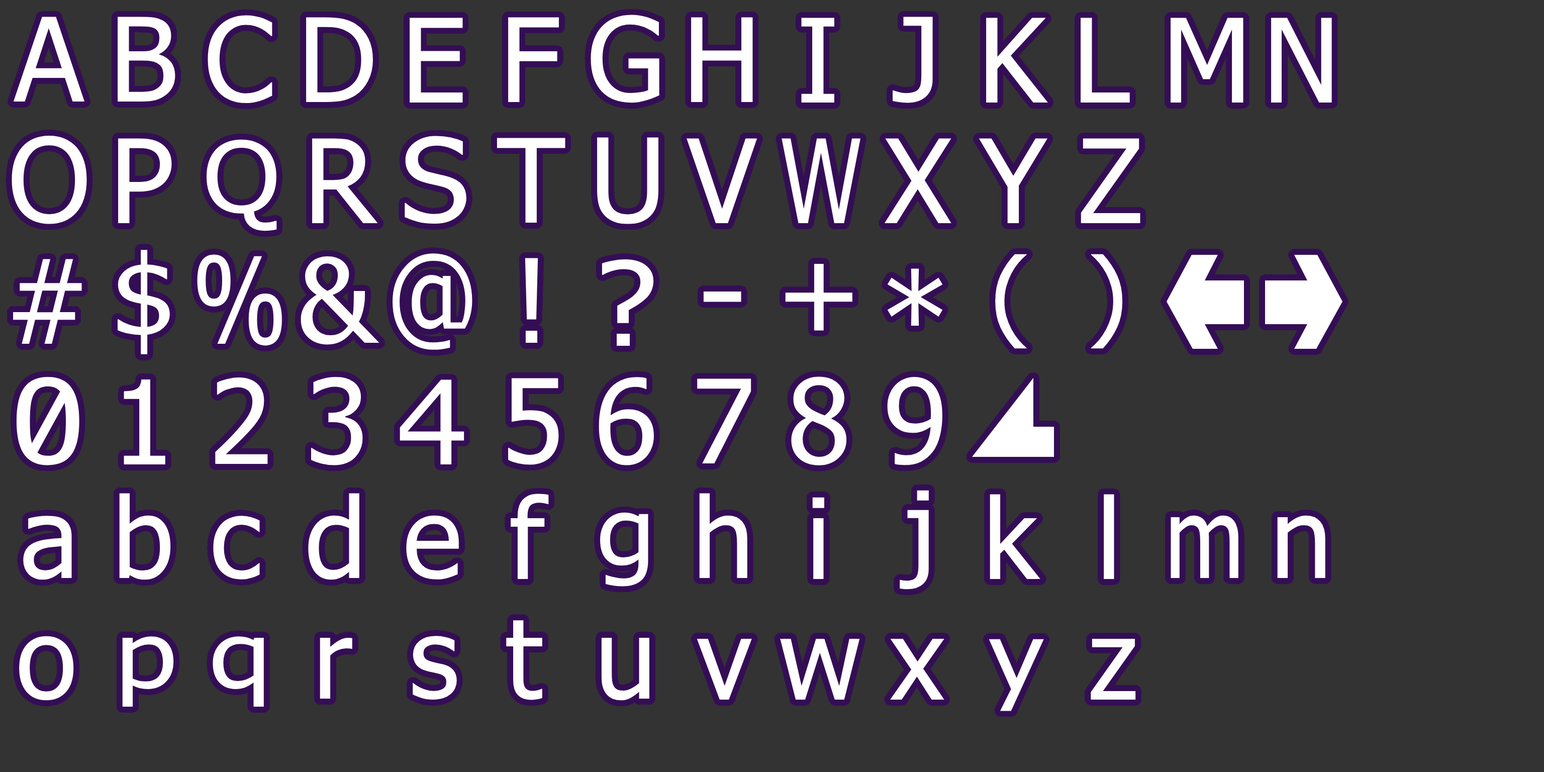
<style>
.page{position:relative;width:1544px;height:772px;background:#333333}
.page>*{position:absolute;margin:0}
.t1{font:116.5px "Tahoma";letter-spacing:-0.065em;color:#fefefd}
.t2{font:116.5px "Tahoma";letter-spacing:-0.065em;color:#fefefd;scale:1.07 1}
.t3{font:97.6px "Tahoma";letter-spacing:-0.065em;color:#fefefd;scale:1.11 1}
.t4{font:116.5px "Tahoma";letter-spacing:-0.065em;color:#fefefd;scale:0.77 1}
.t5{font:110.2px "Tahoma";letter-spacing:-0.065em;color:#fefefd;scale:1.06 1}
.t6{font:120.4px "Tahoma";letter-spacing:-0.065em;color:#fefefd;scale:0.8 1}
.t7{font:113.1px "Tahoma";letter-spacing:-0.065em;color:#fefefd;scale:0.9 1}
.t8{font:98.1px "Tahoma";letter-spacing:-0.065em;color:#fefefd;scale:1.09 1}
.t9{font:116.5px "Tahoma";letter-spacing:-0.065em;color:#fefefd;scale:1.12 1}
.t10{font:126px "Tahoma";letter-spacing:-0.065em;color:#fefefd}
.t11{font:116.5px "Tahoma";letter-spacing:-0.065em;color:#fefefd;scale:1.17 1}
.t12{font:116.5px "Tahoma";letter-spacing:-0.065em;color:#fefefd;scale:1.16 1}
.t13{font:116.5px "Verdana";letter-spacing:-0.065em;color:#fefefd}
.t14{font:111.5px "Tahoma";letter-spacing:-0.065em;color:#fefefd}
.t15{font:105.3px "Tahoma";letter-spacing:-0.065em;color:#fefefd;scale:1.06 1}
.t16{font:96.1px "Tahoma";letter-spacing:-0.065em;color:#fefefd;scale:1.09 1}
.t17{font:111.5px "Tahoma";letter-spacing:-0.065em;color:#fefefd;scale:0.85 1}
.t18{font:92.2px "Tahoma";letter-spacing:-0.065em;color:#fefefd;scale:1.21 1}
.t19{font:96.1px "Tahoma";letter-spacing:-0.065em;color:#fefefd;scale:1.16 1}
</style>
<div class="page">
<p class="t1" style="left:13px;top:17px;width:72px;height:85px">A</p>
<p class="t1" style="left:118px;top:17px;width:57px;height:85px">B</p>
<p class="t1" style="left:208px;top:15px;width:64px;height:89px">C</p>
<p class="t1" style="left:306px;top:17px;width:67px;height:85px">D</p>
<p class="t1" style="left:410px;top:18px;width:53px;height:85px">E</p>
<p class="t1" style="left:508px;top:17px;width:51px;height:85px">F</p>
<p class="t1" style="left:591px;top:15px;width:69px;height:88px">G</p>
<p class="t1" style="left:691px;top:17px;width:62px;height:85px">H</p>
<p class="t1" style="left:801px;top:18px;width:33px;height:85px">I</p>
<p class="t1" style="left:893px;top:17px;width:40px;height:86px">J</p>
<p class="t1" style="left:986px;top:18px;width:62px;height:85px">K</p>
<p class="t1" style="left:1081px;top:18px;width:49px;height:85px">L</p>
<p class="t1" style="left:1171px;top:18px;width:73px;height:85px">M</p>
<p class="t1" style="left:1271px;top:18px;width:61px;height:85px">N</p>
<p class="t1" style="left:12px;top:135px;width:75px;height:89px">O</p>
<p class="t2" style="left:405px;top:136px;width:62px;height:88px">S</p>
<p class="t1" style="left:497px;top:138px;width:69px;height:85px">T</p>
<p class="t1" style="left:597px;top:137px;width:62px;height:87px">U</p>
<p class="t1" style="left:118px;top:138px;width:54px;height:85px">P</p>
<p class="t3" style="left:206px;top:139px;width:71px;height:92px">Q</p>
<p class="t1" style="left:312px;top:138px;width:66px;height:85px">R</p>
<p class="t1" style="left:687px;top:138px;width:71px;height:85px">V</p>
<p class="t4" style="left:782px;top:138px;width:79px;height:85px">W</p>
<p class="t1" style="left:884px;top:138px;width:68px;height:85px">X</p>
<p class="t1" style="left:979px;top:138px;width:69px;height:85px">Y</p>
<p class="t1" style="left:1081px;top:138px;width:60px;height:85px">Z</p>
<p class="t5" style="left:117px;top:250px;width:53px;height:104px">$</p>
<p class="t6" style="left:197px;top:254px;width:85px;height:92px">%</p>
<p class="t1" style="left:301px;top:256px;width:79px;height:89px">&amp;</p>
<p class="t7" style="left:393px;top:253px;width:80px;height:97px">@</p>
<p class="t1" style="left:525px;top:258px;width:13px;height:85px">!</p>
<p class="t8" style="left:995px;top:254px;width:32px;height:95px">(</p>
<p class="t8" style="left:1091px;top:254px;width:32px;height:95px">)</p>
<p class="t1" style="left:13px;top:259px;width:69px;height:85px">#</p>
<p class="t9" style="left:602px;top:259px;width:52px;height:87px">?</p>
<p class="t1" style="left:785px;top:263px;width:68px;height:68px">+</p>
<p class="t10" style="left:887px;top:268px;width:56px;height:58px">*</p>
<p class="t11" style="left:703px;top:292px;width:38px;height:10px">-</p>
<p class="t12" style="left:16px;top:377px;width:63px;height:89px">0</p>
<p class="t1" style="left:215px;top:377px;width:53px;height:87px">2</p>
<p class="t1" style="left:311px;top:377px;width:52px;height:89px">3</p>
<p class="t1" style="left:599px;top:377px;width:55px;height:89px">6</p>
<p class="t1" style="left:791px;top:377px;width:56px;height:89px">8</p>
<p class="t1" style="left:887px;top:377px;width:56px;height:89px">9</p>
<p class="t1" style="left:124px;top:379px;width:41px;height:85px">1</p>
<p class="t13" style="left:400px;top:380px;width:64px;height:84px">4</p>
<p class="t1" style="left:508px;top:378px;width:51px;height:87px">5</p>
<p class="t1" style="left:697px;top:379px;width:55px;height:84px">7</p>
<p class="t14" style="left:119px;top:493px;width:52px;height:87px">b</p>
<p class="t14" style="left:308px;top:493px;width:51px;height:87px">d</p>
<p class="t14" style="left:511px;top:494px;width:38px;height:86px">f</p>
<p class="t14" style="left:699px;top:493px;width:49px;height:86px">h</p>
<p class="t14" style="left:812px;top:497px;width:12px;height:83px">i</p>
<p class="t15" style="left:900px;top:490px;width:29px;height:100px">j</p>
<p class="t14" style="left:990px;top:494px;width:51px;height:86px">k</p>
<p class="t14" style="left:1104px;top:494px;width:10px;height:86px">l</p>
<p class="t14" style="left:23px;top:516px;width:49px;height:64px">a</p>
<p class="t14" style="left:213px;top:516px;width:47px;height:64px">c</p>
<p class="t14" style="left:406px;top:515px;width:53px;height:65px">e</p>
<p class="t16" style="left:600px;top:512px;width:48px;height:75px">g</p>
<p class="t17" style="left:1171px;top:515px;width:68px;height:64px">m</p>
<p class="t14" style="left:1277px;top:515px;width:49px;height:64px">n</p>
<p class="t14" style="left:506px;top:620px;width:36px;height:80px">t</p>
<p class="t14" style="left:19px;top:636px;width:55px;height:65px">o</p>
<p class="t18" style="left:122px;top:636px;width:52px;height:71px">p</p>
<p class="t18" style="left:213px;top:636px;width:51px;height:71px">q</p>
<p class="t14" style="left:320px;top:638px;width:32px;height:61px">r</p>
<p class="t14" style="left:413px;top:636px;width:44px;height:64px">s</p>
<p class="t14" style="left:601px;top:638px;width:48px;height:63px">u</p>
<p class="t14" style="left:697px;top:639px;width:55px;height:61px">v</p>
<p class="t14" style="left:780px;top:639px;width:80px;height:61px">w</p>
<p class="t14" style="left:890px;top:639px;width:55px;height:61px">x</p>
<p class="t19" style="left:989px;top:639px;width:55px;height:72px">y</p>
<p class="t14" style="left:1091px;top:639px;width:45px;height:61px">z</p>
</div>
